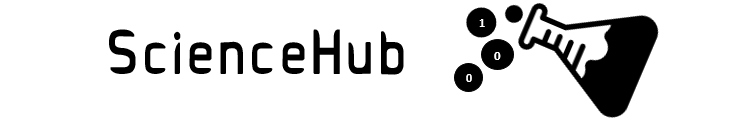
<style>
.page{position:relative;width:756px;height:122px;background:#ffffff}
.page>*{position:absolute;margin:0}
.t1{font:64px "EaDesigner-Bold";letter-spacing:0.075em;color:#000000;scale:0.77 1}
</style>
<div class="page">
<p class="t1" style="left:109px;top:29px;width:295px;height:46px">ScienceHub</p>
</div>
